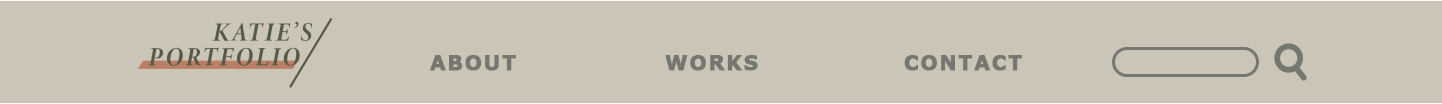
<style>
.page{position:relative;width:1442px;height:104px;background:#cbc5b8}
.page>*{position:absolute;margin:0}
.t1{font:20px "Verdana-Bold";letter-spacing:0.075em;color:#757770;font-weight:bold}
</style>
<div class="page">
<p class="t1" style="left:430px;top:55px;width:86px;height:16px">ABOUT</p>
<p class="t1" style="left:665px;top:55px;width:93px;height:16px">WORKS</p>
<p class="t1" style="left:904px;top:55px;width:118px;height:16px">CONTACT</p>
</div>
